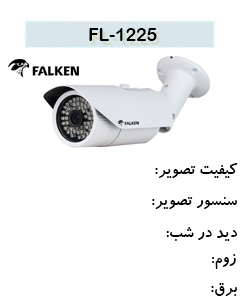
<style>
.page{position:relative;width:240px;height:300px;background:#ffffff}
.page>*{position:absolute;margin:0}
.t1{font:17.6px "ArialRoundedMTBold";color:#000000}
.t2{font:17.6px "BKoodakBold";color:#000000}
</style>
<div class="page">
<p class="t1" style="left:89px;top:28px;width:68px;height:13px">1225-FL</p>
<p class="t2" style="left:155px;top:163px;width:83px;height:15px">کیفیت تصویر:</p>
<p class="t2" style="left:152px;top:197px;width:85px;height:12px">سنسور تصویر:</p>
<p class="t2" style="left:166px;top:227px;width:72px;height:14px">دید در شب:</p>
<p class="t2" style="left:212px;top:254px;width:24px;height:15px">زوم:</p>
<p class="t2" style="left:211px;top:283px;width:26px;height:13px">برق:</p>
</div>
